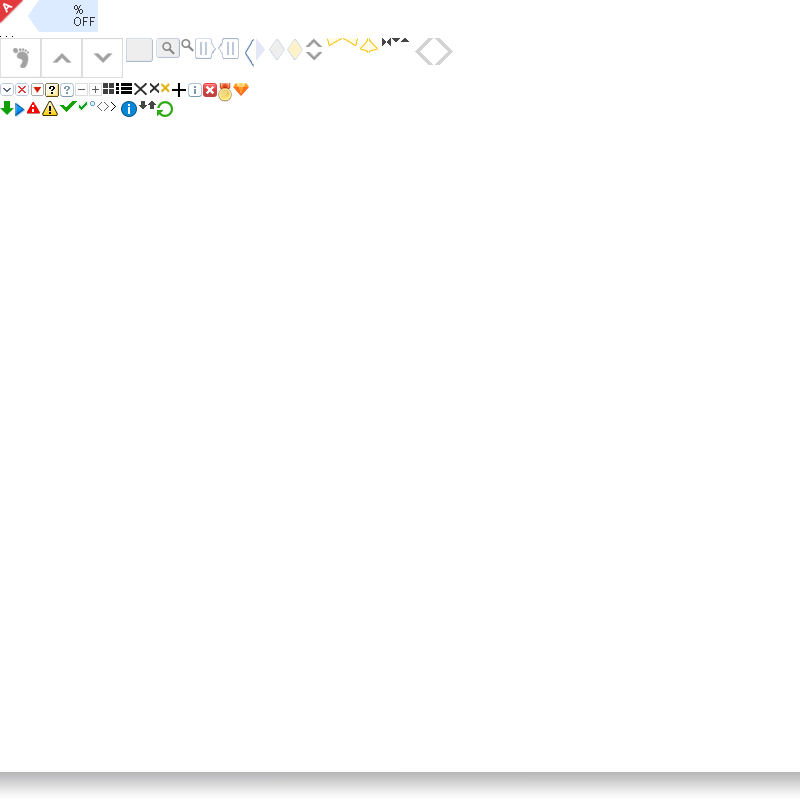
<style>
.page{position:relative;width:800px;height:800px;background:#ffffff}
.page>*{position:absolute;margin:0}
.t1{font:12px "Arial-BoldMT";color:#fefefe}
.t2{font:12px "ArialMT";color:#333333}
</style>
<div class="page">
<p class="t1" style="left:2px;top:3px;width:11px;height:10px;rotate:-45deg">A</p>
<p class="t2" style="left:74px;top:5px;width:9px;height:9px">%</p>
<p class="t2" style="left:74px;top:17px;width:21px;height:9px">OFF</p>
</div>
